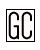
<style>
.page{position:relative;width:40px;height:50px;background:#ffffff}
.page>*{position:absolute;margin:0}
.t1{font:39.9px "Dense-Regular";color:#000000}
</style>
<div class="page">
<p class="t1" style="left:8px;top:11px;width:11px;height:29px">G</p>
<p class="t1" style="left:21px;top:11px;width:11px;height:29px">C</p>
</div>
